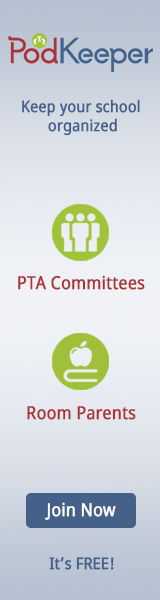
<style>
.page{position:relative;width:160px;height:600px}
.page>*{position:absolute;margin:0}
.t1{font:16px "NotoSans";color:#456189;font-weight:bold;scale:0.88 1}
.t2{font:18px "NotoSans";color:#ab3334;font-weight:bold;scale:0.88 1}
.t3{font:18px "NotoSans";color:#ffffff;font-weight:bold;scale:0.88 1}
</style>
<div class="page">
<p class="t1" style="left:22px;top:99px;width:118px;height:37px;text-align:center">Keep your school <br>organized</p>
<p class="t2" style="left:18px;top:275px;width:127px;height:15px">PTA Committees</p>
<p class="t2" style="left:27px;top:406px;width:109px;height:14px">Room Parents</p>
<p class="t3" style="left:45px;top:502px;width:71px;height:18px">Join Now</p>
<p class="t1" style="left:49px;top:557px;width:65px;height:13px">It’s FREE!</p>
</div>
